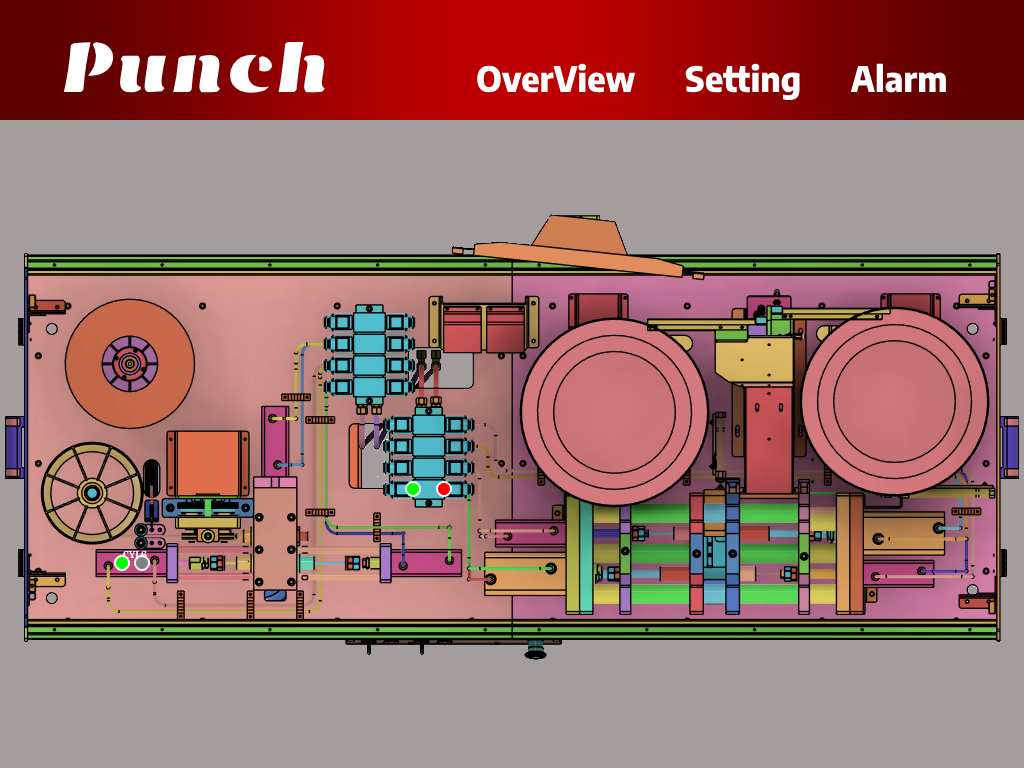
<style>
.page{position:relative;width:1024px;height:768px;background:#a49d9d}
.page>*{position:absolute;margin:0}
.t1{font:74px "EmblemaOne-Regular";color:#ffffff}
.t2{font:35px "EncodeSansSemiCondensed-ExtraBold";color:#ffffff}
.t3{font:10px "Calistoga-Regular";color:#ffffff}
</style>
<div class="page">
<p class="t1" style="left:63px;top:41px;width:262px;height:52px">Punch</p>
<p class="t2" style="left:477px;top:63px;width:469px;height:38px">OverView      Setting      Alarm</p>
<p class="t3" style="left:123px;top:550px;width:24px;height:9px">CYL6</p>
</div>
